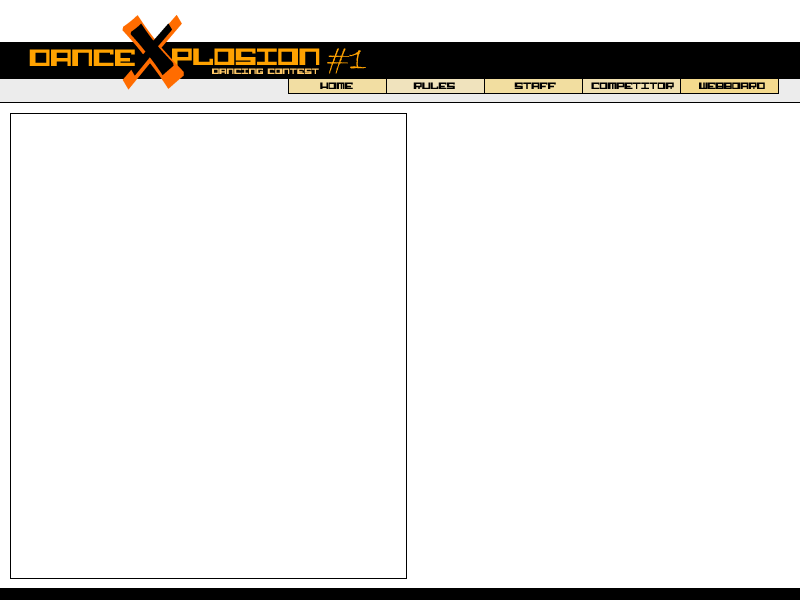
<style>
.page{position:relative;width:800px;height:600px;background:#ffffff}
.page>*{position:absolute;margin:0}
.t1{font:102px "BremenBT-Bold"}
.t2{font:71.1px "BremenBT-Bold";color:#000000}
.t3{font:36px "Alphastep";letter-spacing:0.025em;color:#ffa200}
.t4{font:36px "BradleyHandITC";color:#ffa200}
.t5{font:12px "Alphastep";letter-spacing:0.05em;color:#ffc867}
.t6{font:14px "Alphastep";letter-spacing:0.025em;color:#000000}
</style>
<div class="page">
<p class="t1" style="left:122px;top:15px;width:62px;height:75px">X</p>
<p class="t2" style="left:130px;top:23px;width:44px;height:53px">X</p>
<p class="t3" style="left:29px;top:49px;width:106px;height:17px">DANCE</p>
<p class="t3" style="left:172px;top:48px;width:148px;height:17px">PLOSION</p>
<p class="t4" style="left:327px;top:48px;width:39px;height:26px">#1</p>
<p class="t5" style="left:212px;top:68px;width:107px;height:6px">DANCING CONTEST</p>
<p class="t6" style="left:320px;top:82px;width:33px;height:7px">HOME</p>
<p class="t6" style="left:413px;top:82px;width:42px;height:7px">RULES</p>
<p class="t6" style="left:514px;top:82px;width:42px;height:7px">STAFF</p>
<p class="t6" style="left:591px;top:82px;width:83px;height:7px">COMPETITOR</p>
<p class="t6" style="left:699px;top:82px;width:66px;height:7px">WEBBOARD</p>
</div>
